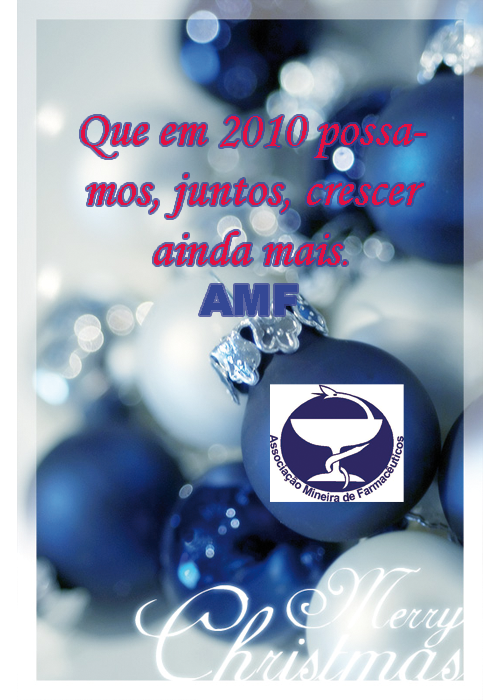
<style>
.page{position:relative;width:500px;height:700px}
.page>*{position:absolute;margin:0}
.t1{font:50px "MonotypeCorsiva";color:#e31042}
.t2{font:41.7px "MonotypeCorsiva";color:#e31042}
.t3{font:41.7px "Arial-Black";color:#344895}
</style>
<div class="page">
<p class="t1" style="left:81px;top:116px;width:345px;height:199px;text-align:center">Que em 2010 possamos, juntos, crescer ainda mais<span class="t2">.<br></span><span class="t3">AMF</span></p>
</div>
